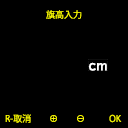
<style>
.page{position:relative;width:128px;height:128px;background:#000000}
.page>*{position:absolute;margin:0}
.t1{font:9px "KozGoPr6N-Regular";color:#ffff00}
</style>
<div class="page">
<p class="t1" style="left:46px;top:10px;width:36px;height:9px">旗高入力</p>
<p class="t1" style="left:5px;top:114px;width:117px;height:9px">R-取消　　⊕　　⊖　 　  OK</p>
</div>
